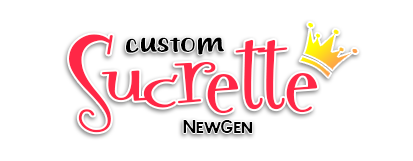
<style>
.page{position:relative;width:413px;height:161px;background:#ffffff}
.page>*{position:absolute;margin:0}
.t1{font:104px "Fontdinerdotcom";color:#ff2746;scale:1.25 1}
.t2{font:39.2px "kittiepersonaluse";color:#000000;scale:1.25 1}
.t3{font:16px "JohnyPalkons";color:#000000;scale:1.25 1}
</style>
<div class="page">
<p class="t1" style="left:69px;top:34px;width:249px;height:99px;rotate:-1deg">Sucrette</p>
<p class="t2" style="left:126px;top:37px;width:98px;height:18px;rotate:-1deg">custom</p>
<p class="t3" style="left:183px;top:120px;width:70px;height:13px">NewGen</p>
</div>
